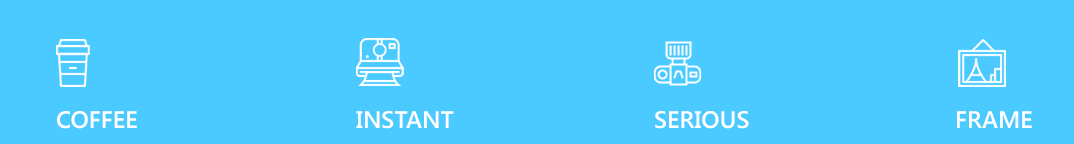
<style>
.page{position:relative;width:1074px;height:144px;background:#4bcaff}
.page>*{position:absolute;margin:0}
.t1{font:24px "SegoeUI-SemiBold";color:#ffffff;text-transform:uppercase}
</style>
<div class="page">
<p class="t1" style="left:57px;top:111px;width:80px;height:18px">Coffee</p>
<p class="t1" style="left:356px;top:111px;width:98px;height:18px">Instant</p>
<p class="t1" style="left:655px;top:111px;width:94px;height:18px">Serious</p>
<p class="t1" style="left:957px;top:111px;width:75px;height:17px">Frame</p>
</div>
